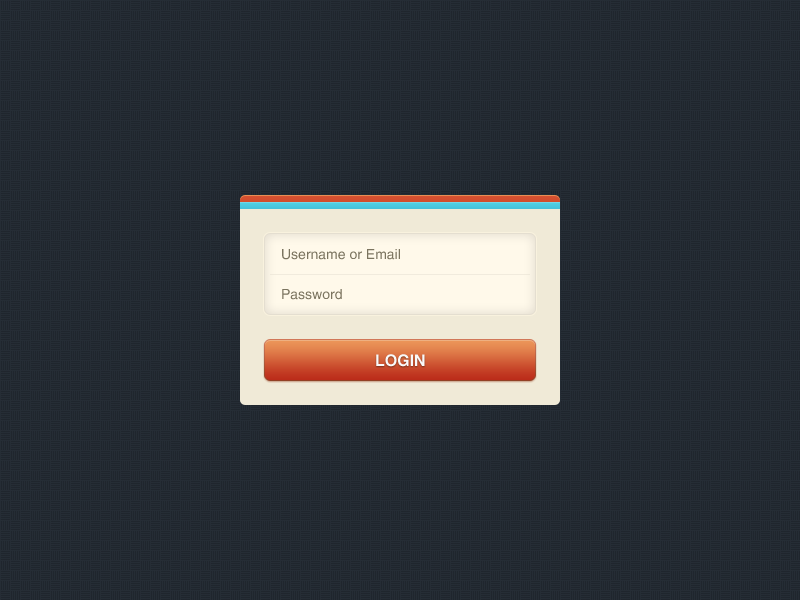
<style>
.page{position:relative;width:800px;height:600px;background:#252d35}
.page>*{position:absolute;margin:0}
.t1{font:14px/40px "HelveticaLT";color:#7b745f}
.t2{font:16px "HelveticaLT-Bold";color:#f9f9f9;text-transform:uppercase}
</style>
<div class="page">
<p class="t1" style="left:282px;top:249px;width:118px;height:51px">Username or Email<br>Password</p>
<p class="t2" style="left:376px;top:354px;width:49px;height:13px">Login</p>
</div>
